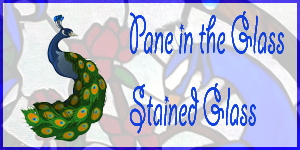
<style>
.page{position:relative;width:300px;height:150px}
.page>*{position:absolute;margin:0}
.t1{font:60px "GiddyupStd";color:#1040de;scale:0.5 1}
</style>
<div class="page">
<p class="t1" style="left:130px;top:11px;width:154px;height:123px">Pane in the Glass<br><br>Stained Glass</p>
<p class="t1" style="left:130px;top:11px;width:154px;height:123px">Pane in the Glass<br><br>Stained Glass</p>
<p class="t1" style="left:130px;top:11px;width:154px;height:123px">Pane in the Glass<br><br>Stained Glass</p>
<p class="t1" style="left:130px;top:11px;width:154px;height:123px">Pane in the Glass<br><br>Stained Glass</p>
</div>
